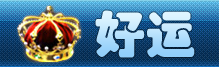
<style>
.page{position:relative;width:219px;height:67px}
.page>*{position:absolute;margin:0}
.t1{font:50.7px "FZHPJW--GB1-0"}
</style>
<div class="page">
<p class="t1" style="left:95px;top:10px;width:100px;height:48px">好运</p>
</div>
